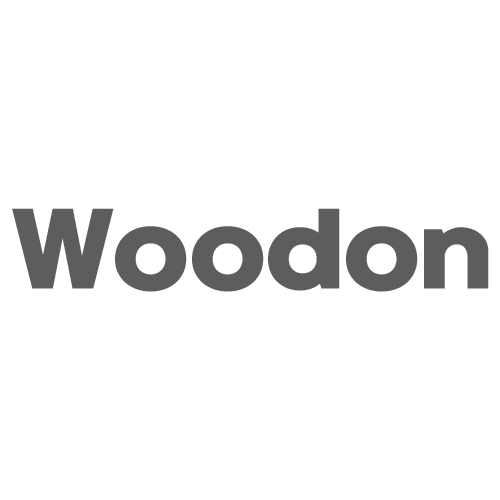
<style>
.page{position:relative;width:500px;height:500px;background:#ffffff}
.page>*{position:absolute;margin:0}
.t1{font:100px "SBAggroB";letter-spacing:-0.05em;color:#5d5d5d}
</style>
<div class="page">
<p class="t1" style="left:12px;top:208px;width:477px;height:84px">Woodon</p>
</div>
